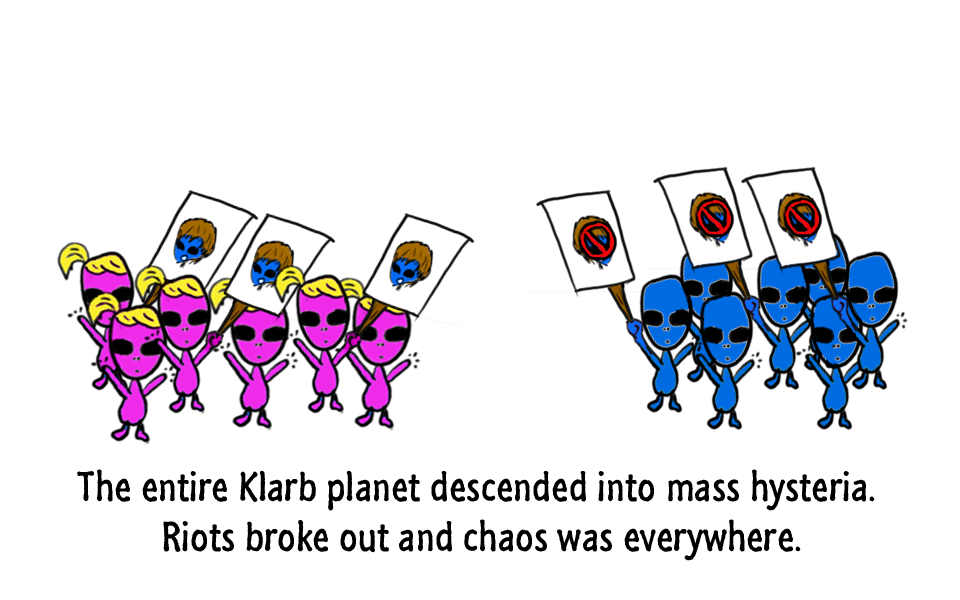
<style>
.page{position:relative;width:960px;height:600px;background:#ffffff}
.page>*{position:absolute;margin:0}
.t1{font:42px "SegoeMarker";color:#000000}
</style>
<div class="page">
<p class="t1" style="left:77px;top:469px;width:798px;height:92px;text-align:center">The entire Klarb planet descended into mass hysteria. <br>Riots broke out and chaos was everywhere.</p>
</div>
